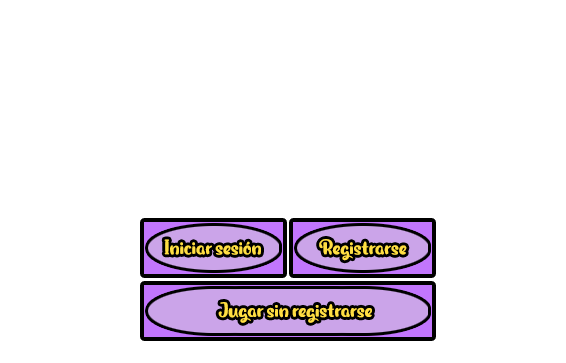
<style>
.page{position:relative;width:566px;height:363px;background:#ffffff}
.page>*{position:absolute;margin:0}
.t1{font:21.3px "MagicOwl-PersonalUse";color:#ffde43}
</style>
<div class="page">
<p class="t1" style="left:164px;top:239px;width:97px;height:16px">Iniciar sesión</p>
<p class="t1" style="left:319px;top:239px;width:88px;height:22px">Registrarse</p>
<p class="t1" style="left:218px;top:302px;width:154px;height:21px">Jugar sin registrarse</p>
</div>
